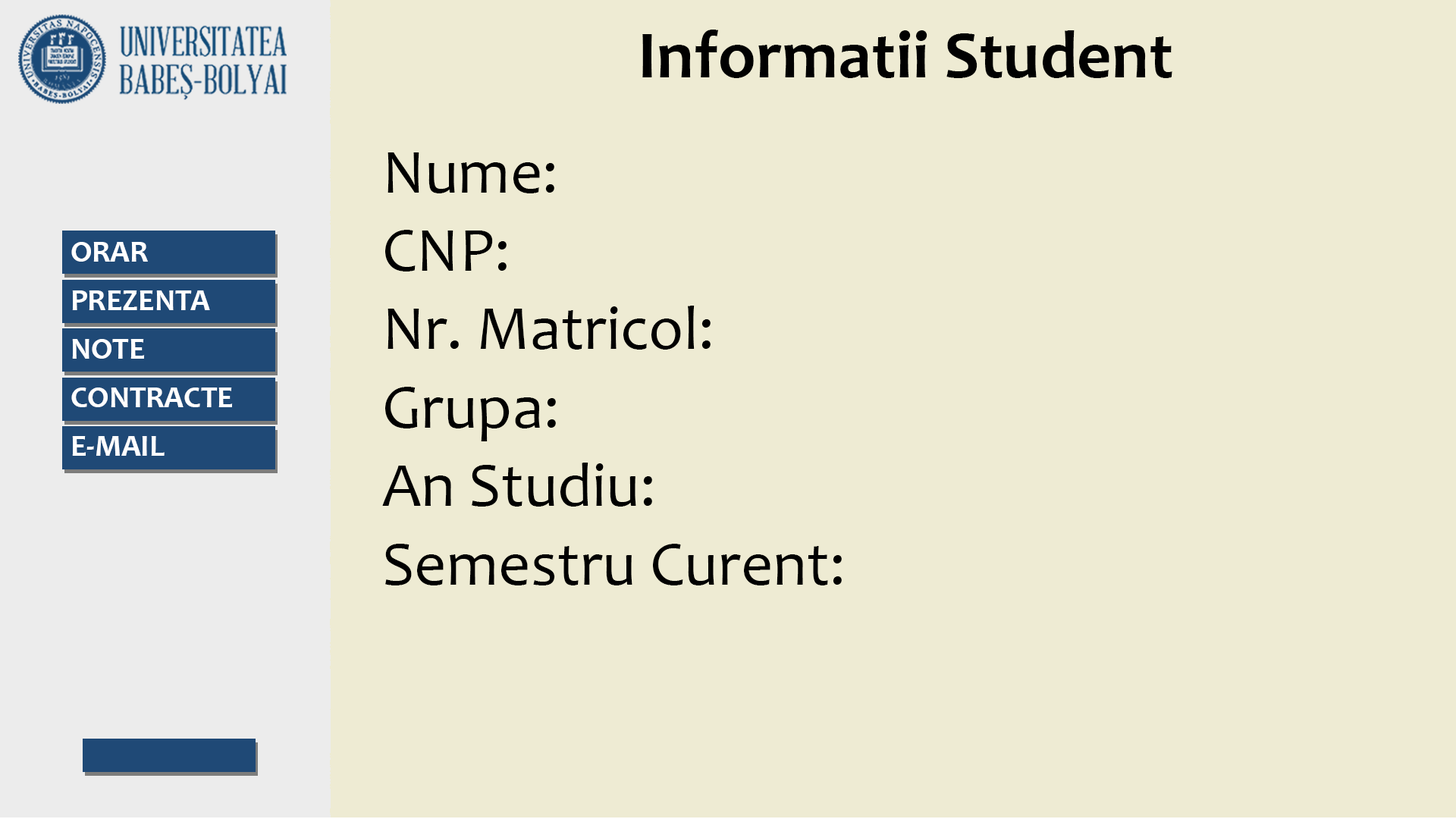
<style>
.page{position:relative;width:1456px;height:819px;background:#eeebd3}
.page>*{position:absolute;margin:0}
.t1{font:67.5px "Candara-Bold";color:#000000}
.t2{font:63.1px/78.4px "Candara";color:#000000}
.t3{font:30px/48.4px "Candara-Bold";color:#ffffff;scale:1.03 1}
</style>
<div class="page">
<p class="t1" style="left:642px;top:30px;width:530px;height:48px">Informatii Student</p>
<p class="t2" style="left:382px;top:152px;width:460px;height:433px">Nume:<br>CNP:<br>Nr. Matricol:<br>Grupa:<br>An Studiu:<br>Semestru Curent:</p>
<p class="t3" style="left:71px;top:242px;width:162px;height:214px">ORAR<br>PREZENTA<br>NOTE<br>CONTRACTE<br>E-MAIL</p>
</div>
